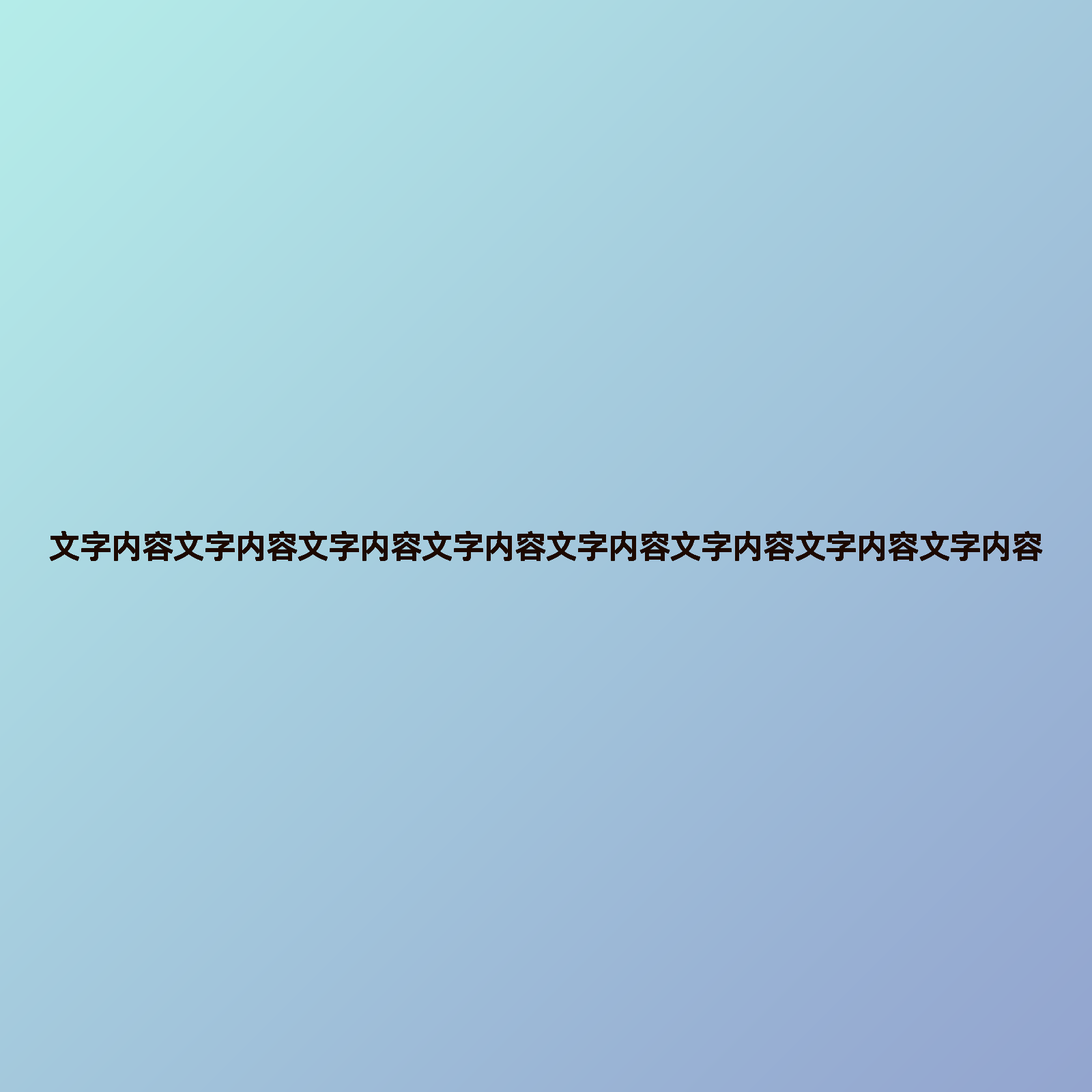
<style>
.page{position:relative;width:1092px;height:1092px}
.page>*{position:absolute;margin:0}
.t1{font:32.8px "AlibabaPuHuiTi_2_85_Bold";color:#1c0900}
</style>
<div class="page">
<p class="t1" style="left:49px;top:531px;width:994px;height:30px">文字内容文字内容文字内容文字内容文字内容文字内容文字内容文字内容</p>
<p class="t1" style="left:49px;top:531px;width:994px;height:30px">文字内容文字内容文字内容文字内容文字内容文字内容文字内容文字内容</p>
<p class="t1" style="left:49px;top:531px;width:994px;height:30px">文字内容文字内容文字内容文字内容文字内容文字内容文字内容文字内容</p>
<p class="t1" style="left:49px;top:531px;width:994px;height:30px">文字内容文字内容文字内容文字内容文字内容文字内容文字内容文字内容</p>
<p class="t1" style="left:49px;top:531px;width:994px;height:30px">文字内容文字内容文字内容文字内容文字内容文字内容文字内容文字内容</p>
<p class="t1" style="left:49px;top:531px;width:994px;height:30px">文字内容文字内容文字内容文字内容文字内容文字内容文字内容文字内容</p>
<p class="t1" style="left:49px;top:531px;width:994px;height:30px">文字内容文字内容文字内容文字内容文字内容文字内容文字内容文字内容</p>
<p class="t1" style="left:49px;top:531px;width:994px;height:30px">文字内容文字内容文字内容文字内容文字内容文字内容文字内容文字内容</p>
<p class="t1" style="left:49px;top:531px;width:994px;height:30px">文字内容文字内容文字内容文字内容文字内容文字内容文字内容文字内容</p>
<p class="t1" style="left:49px;top:531px;width:994px;height:30px">文字内容文字内容文字内容文字内容文字内容文字内容文字内容文字内容</p>
<p class="t1" style="left:49px;top:531px;width:994px;height:30px">文字内容文字内容文字内容文字内容文字内容文字内容文字内容文字内容</p>
<p class="t1" style="left:49px;top:531px;width:994px;height:30px">文字内容文字内容文字内容文字内容文字内容文字内容文字内容文字内容</p>
</div>
